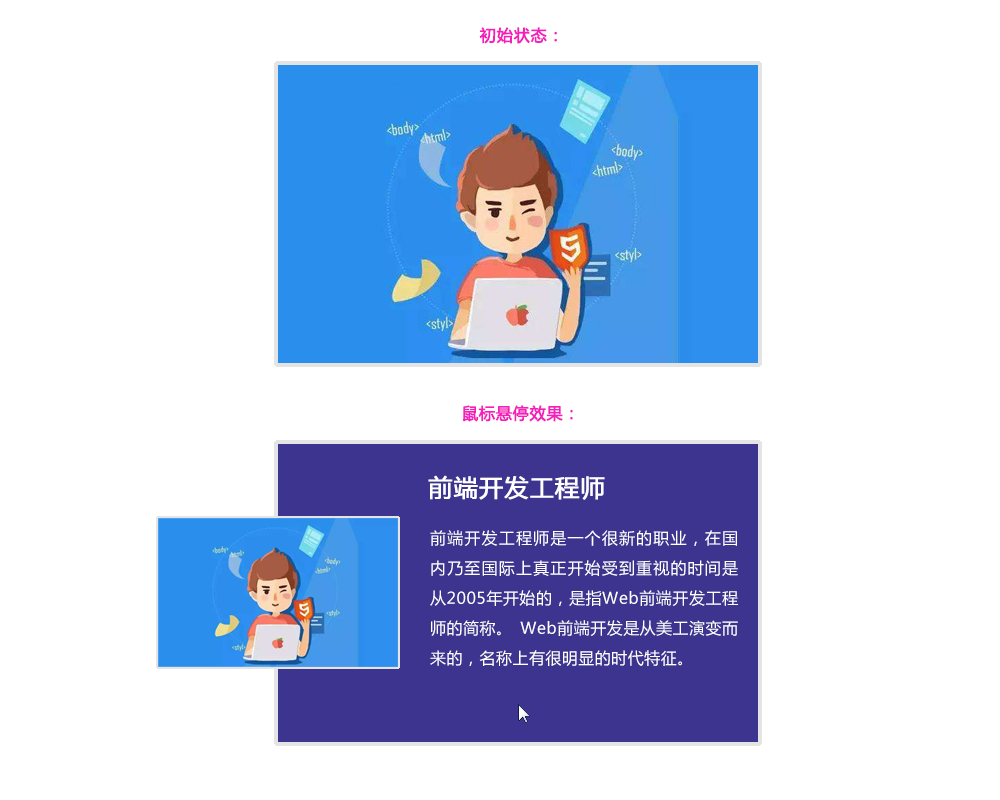
<style>
.page{position:relative;width:1000px;height:800px;background:#ffffff}
.page>*{position:absolute;margin:0}
.t1{font:16px "MicrosoftYaHei";letter-spacing:0.03em;color:#f520bb;font-weight:bold}
.t2{font:24px "MicrosoftYaHei";letter-spacing:0.03em;color:#ffffff;font-weight:bold}
.t3{font:16px/30px "MicrosoftYaHei";letter-spacing:0.03em;color:#ffffff}
</style>
<div class="page">
<p class="t1" style="left:479px;top:27px;width:78px;height:17px">初始状态：</p>
<p class="t1" style="left:462px;top:405px;width:111px;height:17px">鼠标悬停效果：</p>
<p class="t2" style="left:428px;top:475px;width:177px;height:25px">前端开发工程师</p>
<p class="t3" style="left:430px;top:530px;width:308px;height:136px;text-align:justify">前端开发工程师是一个很新的职业，在国内乃至国际上真正开始受到重视的时间是从2005年开始的，是指Web前端开发工程师的简称。 Web前端开发是从美工演变而来的，名称上有很明显的时代特征。</p>
</div>
